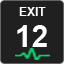
<style>
.page{position:relative;width:64px;height:64px;background:#202020}
.page>*{position:absolute;margin:0}
.t1{font:12px "Arial-BoldMT";color:#ffffff}
.t2{font:30px "Arial-BoldMT";color:#ffffff}
</style>
<div class="page">
<p class="t1" style="left:19px;top:7px;width:27px;height:9px">EXIT</p>
<p class="t2" style="left:17px;top:25px;width:30px;height:22px">12</p>
</div>
